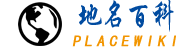
<style>
.page{position:relative;width:188px;height:50px;background:#ffffff}
.page>*{position:absolute;margin:0}
.t1{font:33.8px "STXingkai";color:#004ca1;scale:0.73 1}
.t2{font:15.4px "SimHei";letter-spacing:0.26em;color:#f39500;font-weight:bold;font-style:italic}
</style>
<div class="page">
<p class="t1" style="left:78px;top:0px;width:96px;height:32px">地名百科</p>
<p class="t2" style="left:72px;top:35px;width:104px;height:12px">PLACEWIKI</p>
</div>
